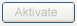
<style>
.page{position:relative;width:77px;height:26px;background:#f5f3ef}
.page>*{position:absolute;margin:0}
.t1{font:12px "ArialMT";color:#bfbfbf}
</style>
<div class="page">
<p class="t1" style="left:14px;top:7px;width:43px;height:10px">Aktivate</p>
</div>
